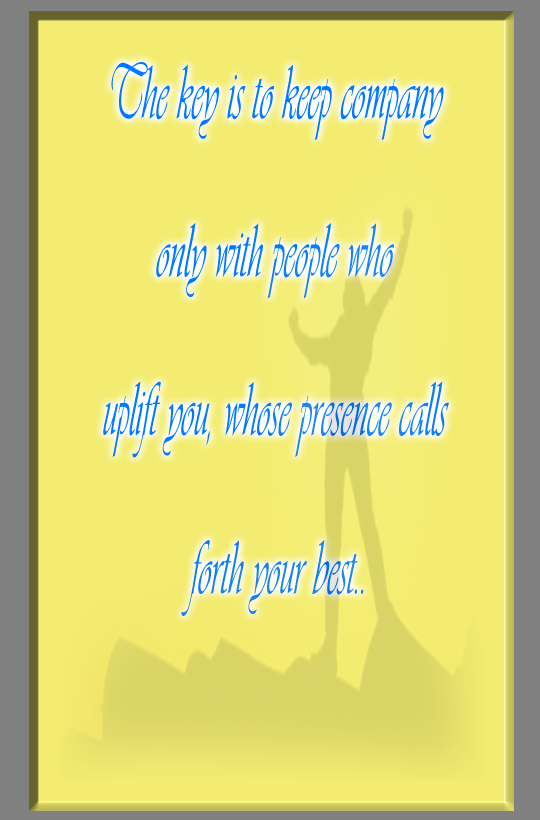
<style>
.page{position:relative;width:540px;height:820px;background:#f3ec71}
.page>*{position:absolute;margin:0}
.t1{font:80.5px/158.4px "Vivaldii";color:#0078ff;scale:0.48 1}
</style>
<div class="page">
<p class="t1" style="left:103px;top:62px;width:346px;height:554px;text-align:center">The key is to keep company <br>only with people who <br>uplift you, whose presence calls <br>forth your best..</p>
</div>
